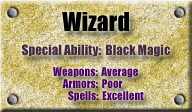
<style>
.page{position:relative;width:192px;height:112px}
.page>*{position:absolute;margin:0}
.t1{font:24px "Impact";color:#000000}
.t2{font:13px "Impact";color:#422742}
.t3{font:11px "Impact";color:#4a006c}
</style>
<div class="page">
<p class="t1" style="left:62px;top:12px;width:67px;height:20px">Wizard</p>
<p class="t2" style="left:22px;top:44px;width:148px;height:13px">Special Ability:  Black Magic</p>
<p class="t3" style="left:53px;top:67px;width:85px;height:11px">Weapons:  Average</p>
<p class="t3" style="left:62px;top:79px;width:61px;height:9px">Armors:  Poor</p>
<p class="t3" style="left:68px;top:91px;width:76px;height:10px">Spells:  Excellent</p>
</div>
